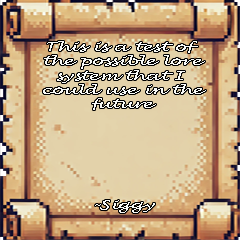
<style>
.page{position:relative;width:240px;height:240px}
.page>*{position:absolute;margin:0}
.t1{font:12px "LucidaHandwriting-Italic";color:#f9fbf9;scale:1.5 1}
</style>
<div class="page">
<p class="t1" style="left:43px;top:41px;width:163px;height:172px;text-align:center">This is a test of <br>the possible lore<br>system that I <br>could use in the<br>future<br><br><br><br><br><br><br>-Siggy</p>
</div>
